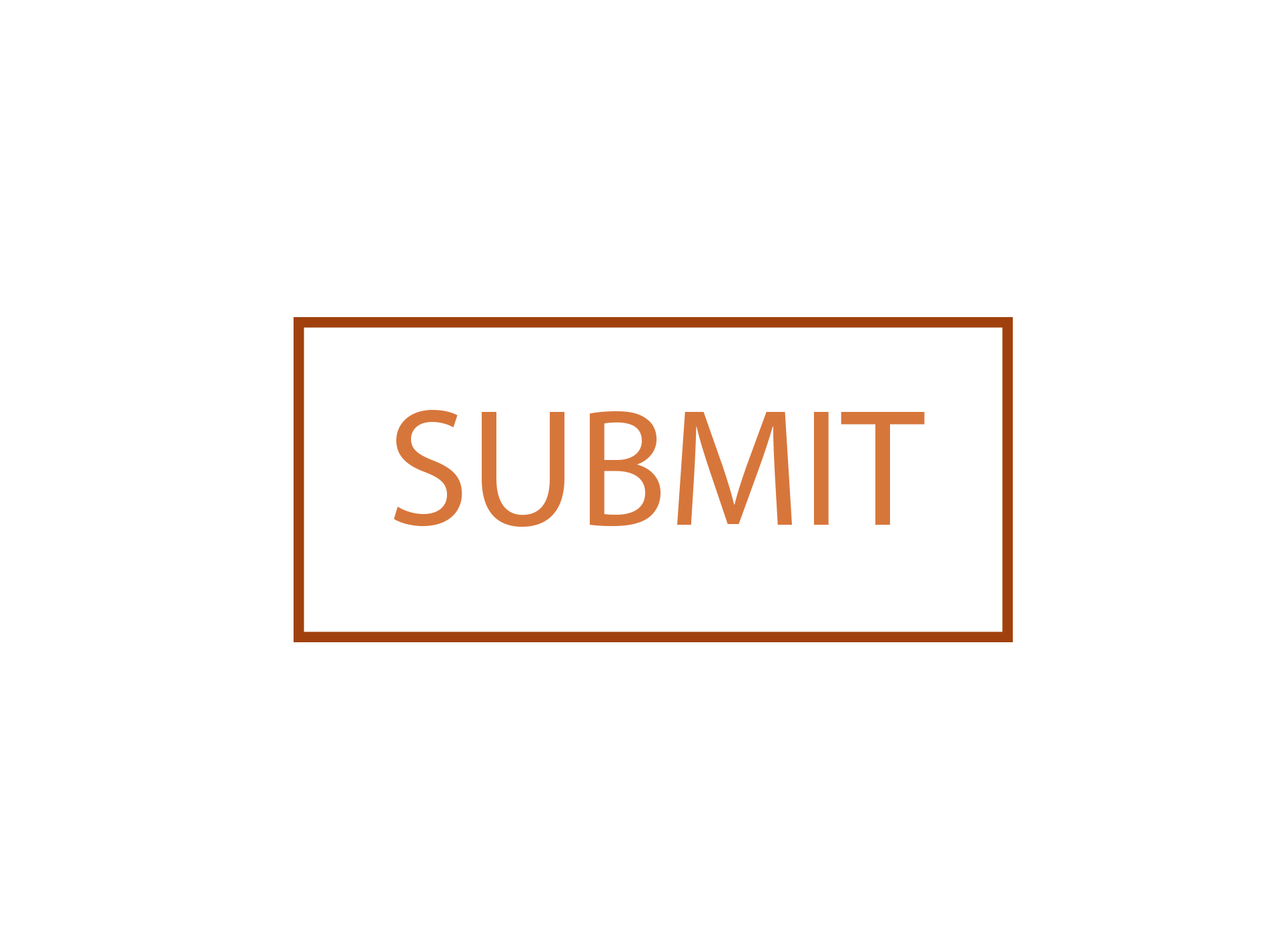
<style>
.page{position:relative;width:1261px;height:946px;background:#ffffff}
.page>*{position:absolute;margin:0}
.t1{font:166.8px "MyriadPro-Regular";color:#d7763b}
</style>
<div class="page">
<p class="t1" style="left:394px;top:410px;width:531px;height:116px">SUBMIT</p>
</div>
